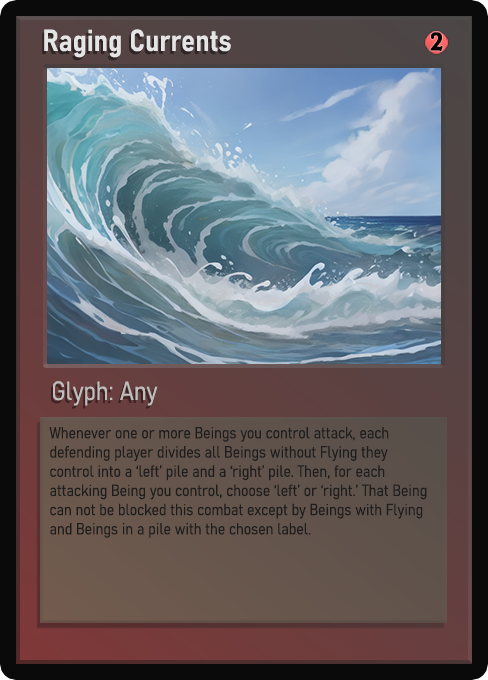
<style>
.page{position:relative;width:488px;height:680px}
.page>*{position:absolute;margin:0}
.t1{font:30px "Bahnschrift-SemiBoldSemiCondensed";color:#f2f2f2;font-weight:bold}
.t2{font:25px "WTRRoycroft";color:#000000;font-weight:bold;scale:1.09 1}
.t3{font:26px "Bahnschrift-LightSemiCondensed";color:#c8c8c8;font-weight:bold}
.t4{font:16px "Bahnschrift-LightSemiCondensed";color:#1e1e1e;font-weight:bold}
</style>
<div class="page">
<p class="t1" style="left:44px;top:29px;width:187px;height:29px;opacity:0.9">Raging Currents</p>
<p class="t2" style="left:430px;top:32px;width:13px;height:19px">2</p>
<p class="t3" style="left:53px;top:381px;width:105px;height:25px;opacity:0.9">Glyph: Any</p>
<p class="t4" style="left:49px;top:427px;width:378px;height:111px">Whenever one or more Beings you control attack, each defending player divides all Beings without Flying they control into a ‘left’ pile and a ‘right’ pile. Then, for each attacking Being you control, choose ‘left’ or ‘right.’ That Being can not be blocked this combat except by Beings with Flying and Beings in a pile with the chosen label.</p>
</div>
